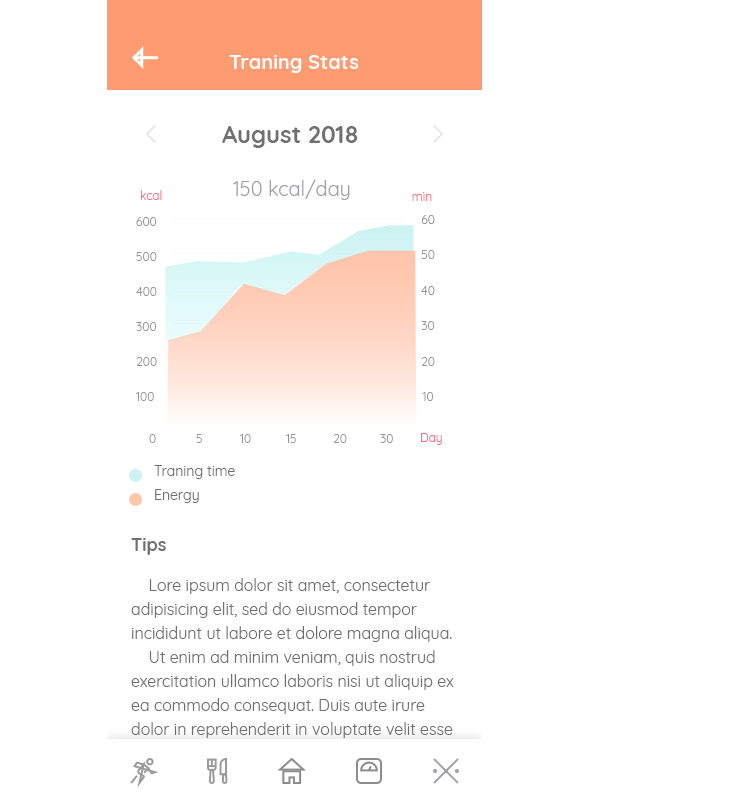
<style>
.page{position:relative;width:743px;height:812px;background:#ffffff}
.page>*{position:absolute;margin:0}
.t1{font:20px "Quicksand-Bold";color:#ffffff}
.t2{font:24px "Quicksand-Bold";color:#707070}
.t3{font:20px "Quicksand-Regular";color:#a4a2aa}
.t4{font:12px "Quicksand-Regular";color:#fd687d}
.t5{font:12px "Quicksand-Regular";color:#949397}
.t6{font:14px "Quicksand-Regular";color:#707070}
.t7{font:18px "Quicksand-Bold";color:#707070}
</style>
<div class="page">
<p class="t1" style="left:229px;top:55px;width:130px;height:18px">Traning Stats</p>
<p class="t2" style="left:222px;top:126px;width:136px;height:22px">August 2018</p>
<p class="t3" style="left:233px;top:179px;width:117px;height:21px">150 kcal/day</p>
<p class="t4" style="left:140px;top:190px;width:22px;height:10px">kcal</p>
<p class="t4" style="left:412px;top:192px;width:20px;height:9px">min</p>
<p class="t5" style="left:136px;top:217px;width:21px;height:9px">600</p>
<p class="t5" style="left:421px;top:215px;width:14px;height:9px">60</p>
<p class="t5" style="left:136px;top:252px;width:21px;height:9px">500</p>
<p class="t5" style="left:421px;top:250px;width:14px;height:9px">50</p>
<p class="t5" style="left:136px;top:287px;width:21px;height:9px">400</p>
<p class="t5" style="left:421px;top:286px;width:14px;height:9px">40</p>
<p class="t5" style="left:136px;top:322px;width:21px;height:9px">300</p>
<p class="t5" style="left:421px;top:321px;width:14px;height:9px">30</p>
<p class="t5" style="left:136px;top:357px;width:21px;height:9px">200</p>
<p class="t5" style="left:421px;top:357px;width:14px;height:9px">20</p>
<p class="t5" style="left:135px;top:392px;width:19px;height:9px">100</p>
<p class="t5" style="left:422px;top:392px;width:12px;height:9px">10</p>
<p class="t5" style="left:149px;top:434px;width:7px;height:9px">0</p>
<p class="t5" style="left:196px;top:434px;width:6px;height:9px">5</p>
<p class="t5" style="left:239px;top:434px;width:12px;height:9px">10</p>
<p class="t5" style="left:285px;top:434px;width:11px;height:9px">15</p>
<p class="t5" style="left:333px;top:434px;width:14px;height:9px">20</p>
<p class="t5" style="left:380px;top:434px;width:13px;height:9px">30</p>
<p class="t4" style="left:421px;top:433px;width:21px;height:12px">Day</p>
<p class="t6" style="left:154px;top:465px;width:81px;height:14px">Traning time</p>
<p class="t6" style="left:155px;top:489px;width:44px;height:14px">Energy</p>
<p class="t7" style="left:131px;top:538px;width:35px;height:17px">Tips</p>
</div>
